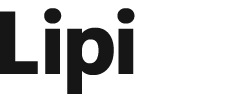
<style>
.page{position:relative;width:243px;height:100px;background:#ffffff}
.page>*{position:absolute;margin:0}
.t1{font:80px "MicrosoftYaHei-Bold";letter-spacing:-0.05em;color:#161616;font-weight:bold}
.t2{font:80px "MicrosoftYaHei-Bold";letter-spacing:0.01em;color:#161616;font-weight:bold}
</style>
<div class="page">
<p class="t1" style="left:0px;top:8px;width:135px;height:86px"><span class="t2">L</span>ipi</p>
</div>
